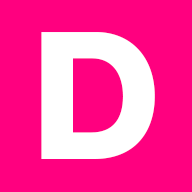
<style>
.page{position:relative;width:192px;height:192px;background:#ff007f}
.page>*{position:absolute;margin:0}
.t1{font:178px "HaasGrotDisp-75Bold";letter-spacing:0.1em;color:#ffffff}
</style>
<div class="page">
<p class="t1" style="left:41px;top:32px;width:114px;height:127px">D</p>
</div>
